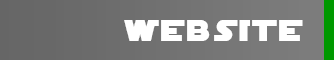
<style>
.page{position:relative;width:334px;height:60px}
.page>*{position:absolute;margin:0}
.t1{font:31px "SFDistantGalaxyAlternate";letter-spacing:0.12em;color:#ffffff}
</style>
<div class="page">
<p class="t1" style="left:124px;top:20px;width:179px;height:21px">website</p>
</div>
